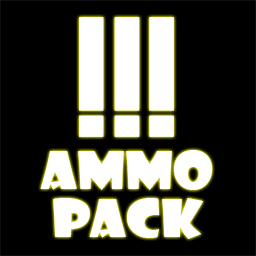
<style>
.page{position:relative;width:256px;height:256px;background:#000000}
.page>*{position:absolute;margin:0}
.t1{font:51px/48px "ShowcardGothic-Reg";color:#ffffff;scale:1.14 1}
</style>
<div class="page">
<p class="t1" style="left:40px;top:150px;width:173px;height:89px;text-align:center">AMMO<br>PACK</p>
</div>
